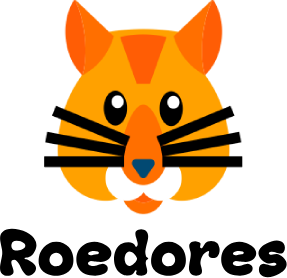
<style>
.page{position:relative;width:287px;height:278px;background:#ffffff}
.page>*{position:absolute;margin:0}
.t1{font:55.9px "Kush-Fat";color:#000000}
</style>
<div class="page">
<p class="t1" style="left:0px;top:228px;width:287px;height:50px">Roedores</p>
</div>
